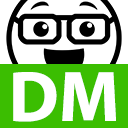
<style>
.page{position:relative;width:128px;height:128px;background:#ffffff}
.page>*{position:absolute;margin:0}
.t1{font:72px "MyriadPro-Bold";color:#ffffff}
</style>
<div class="page">
<p class="t1" style="left:13px;top:72px;width:103px;height:50px">DM</p>
</div>
